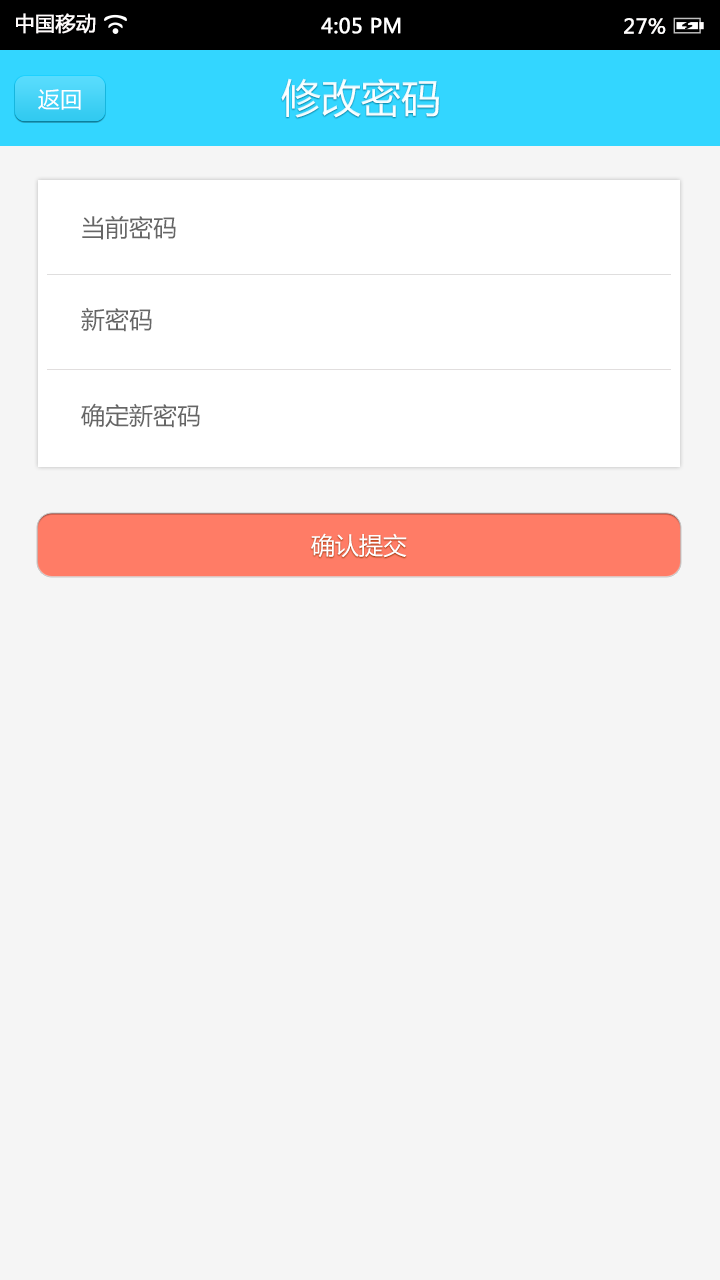
<style>
.page{position:relative;width:720px;height:1280px;background:#f5f5f5}
.page>*{position:absolute;margin:0}
.t1{font:20px "MicrosoftYaHei";color:#fffcfc;font-weight:bold}
.t2{font:20px "MicrosoftYaHei";color:#ffffff;font-weight:bold}
.t3{font:20px "MicrosoftYaHei";color:#fffefe;font-weight:bold}
.t4{font:40px "MicrosoftYaHei";color:#ffffff}
.t5{font:22px "MicrosoftYaHei";color:#ffffff}
.t6{font:24px "MicrosoftYaHei";color:#666666}
.t7{font:24px "MicrosoftYaHei";color:#ffffff}
</style>
<div class="page">
<p class="t1" style="left:16px;top:13px;width:80px;height:21px">中国移动</p>
<p class="t2" style="left:321px;top:17px;width:80px;height:17px">4:05 PM</p>
<p class="t3" style="left:624px;top:18px;width:42px;height:16px">27%</p>
<p class="t4" style="left:281px;top:78px;width:158px;height:40px">修改密码</p>
<p class="t5" style="left:38px;top:89px;width:43px;height:21px">返回</p>
<p class="t6" style="left:82px;top:215px;width:94px;height:25px">当前密码</p>
<p class="t6" style="left:81px;top:307px;width:71px;height:25px">新密码</p>
<p class="t6" style="left:81px;top:403px;width:119px;height:25px">确定新密码</p>
<p class="t7" style="left:311px;top:533px;width:96px;height:25px">确认提交</p>
</div>
